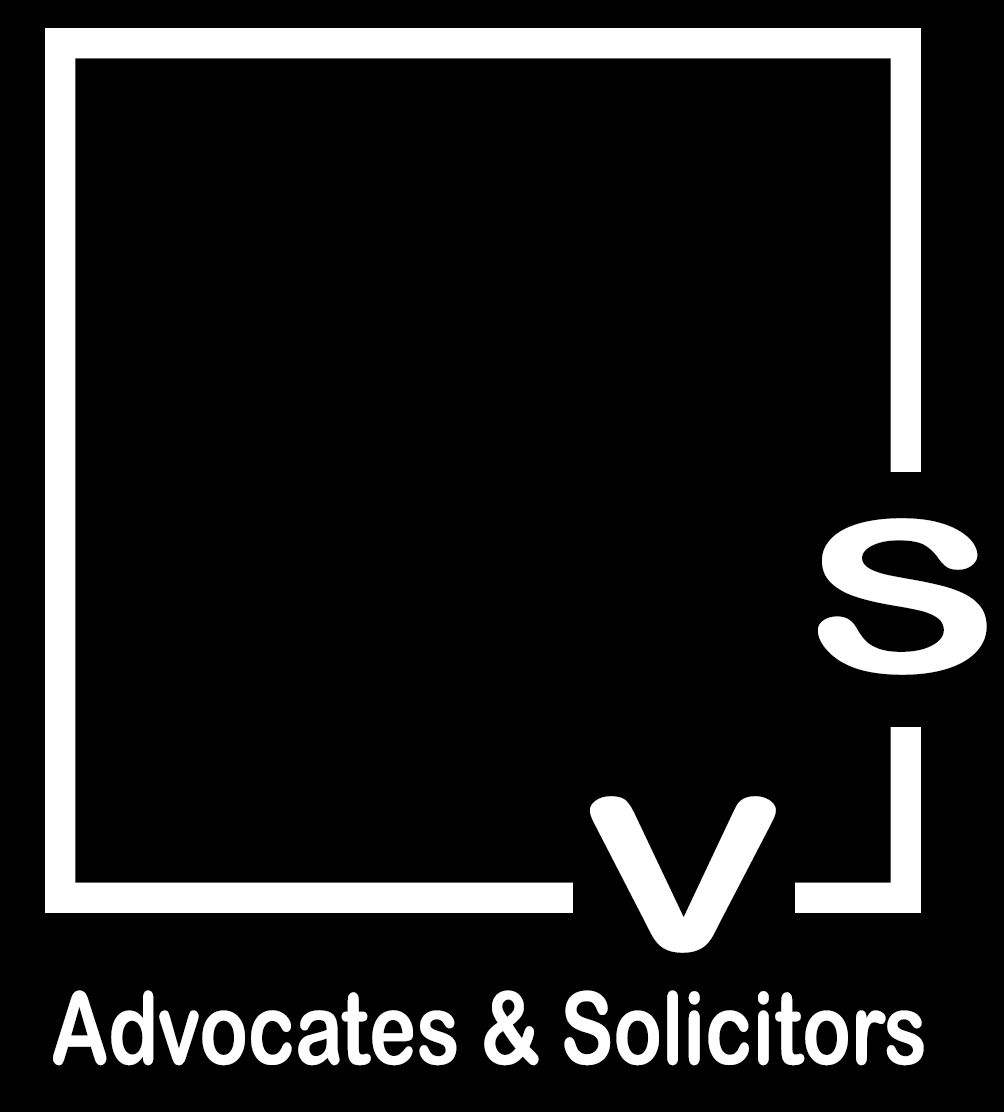
<style>
.page{position:relative;width:1004px;height:1112px;background:#000000}
.page>*{position:absolute;margin:0}
.t1{font:210.9px "ArialRoundedMTBold";color:#ffffff;scale:1.4 1}
.t2{font:100.5px "ArialRoundedMTBold";color:#ffffff;scale:0.79 1}
</style>
<div class="page">
<p class="t1" style="left:818px;top:518px;width:169px;height:157px">S</p>
<p class="t1" style="left:590px;top:796px;width:186px;height:157px">V</p>
<p class="t2" style="left:53px;top:990px;width:871px;height:76px">Advocates &amp; Solicitors</p>
</div>
